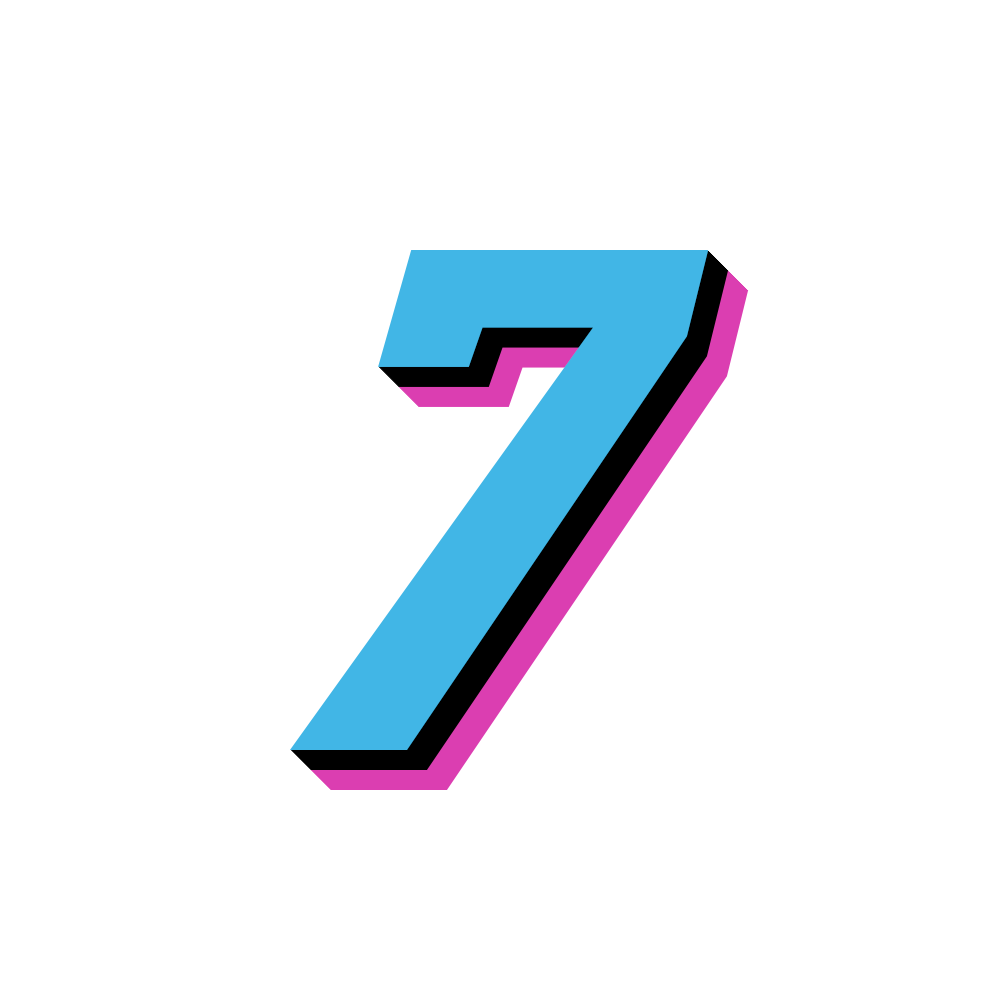
<style>
.page{position:relative;width:1000px;height:1000px;background:#ffffff}
.page>*{position:absolute;margin:0}
.t1{font:625px "NBAHeat";color:#41b6e6}
</style>
<div class="page">
<p class="t1" style="left:290px;top:250px;width:419px;height:500px">7</p>
</div>
